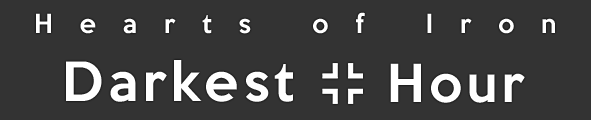
<style>
.page{position:relative;width:591px;height:120px;background:#333333}
.page>*{position:absolute;margin:0}
.t1{font:24px "KeepCalm-Medium";letter-spacing:1.12em;color:#ffffff}
.t2{font:49.6px "KeepCalm-Medium";letter-spacing:0.1em;color:#ffffff}
.t3{font:47.6px "KeepCalm-Medium";letter-spacing:0.1em;color:#ffffff}
</style>
<div class="page">
<p class="t1" style="left:36px;top:12px;width:519px;height:22px">Hearts of Iron</p>
<p class="t2" style="left:66px;top:60px;width:227px;height:42px">Darkest</p>
<p class="t3" style="left:390px;top:63px;width:135px;height:40px">Hour</p>
</div>
